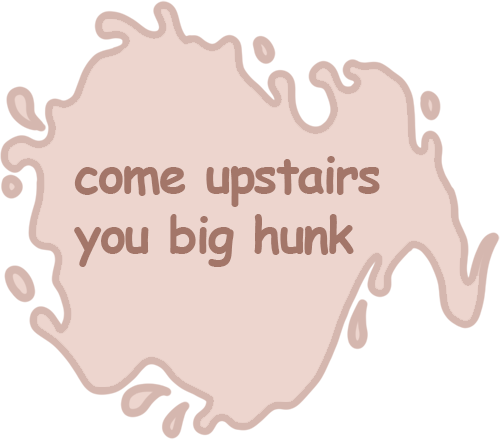
<style>
.page{position:relative;width:500px;height:440px;background:#edd5ce}
.page>*{position:absolute;margin:0}
.t1{font:50px "ComicSansMS-Bold";letter-spacing:-0.04em;color:#a37669}
</style>
<div class="page">
<p class="t1" style="left:74px;top:156px;width:306px;height:111px">come upstairs<br>you big hunk</p>
</div>
